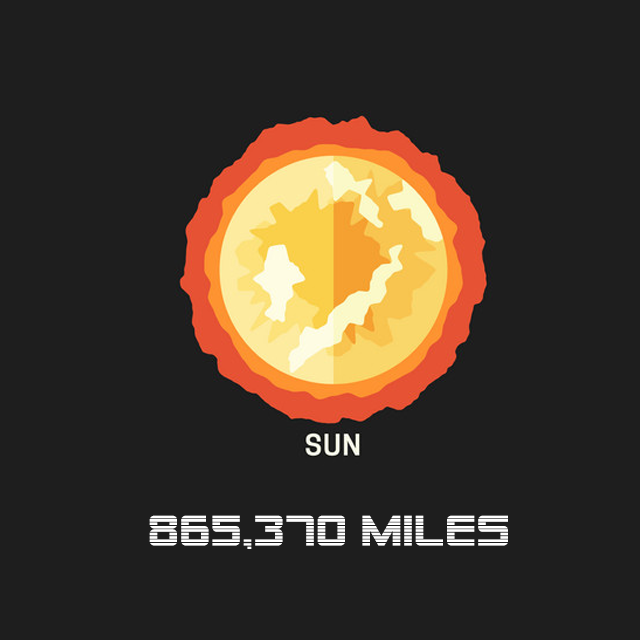
<style>
.page{position:relative;width:640px;height:640px;background:#1e1e1e}
.page>*{position:absolute;margin:0}
.t1{font:42.6px "AlienEncounters";letter-spacing:0.02em;color:#ffffff;scale:1.17 1}
</style>
<div class="page">
<p class="t1" style="left:149px;top:515px;width:359px;height:34px">865,370 miles</p>
</div>
